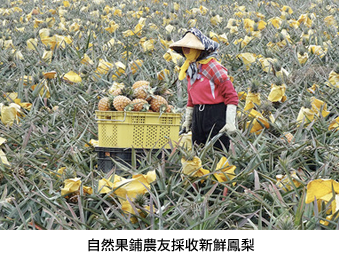
<style>
.page{position:relative;width:339px;height:267px}
.page>*{position:absolute;margin:0}
.t1{font:14px "LiHeiPro";color:#000000}
</style>
<div class="page">
<p class="t1" style="left:88px;top:238px;width:167px;height:14px">自然果鋪農友採收新鮮鳳梨</p>
</div>
